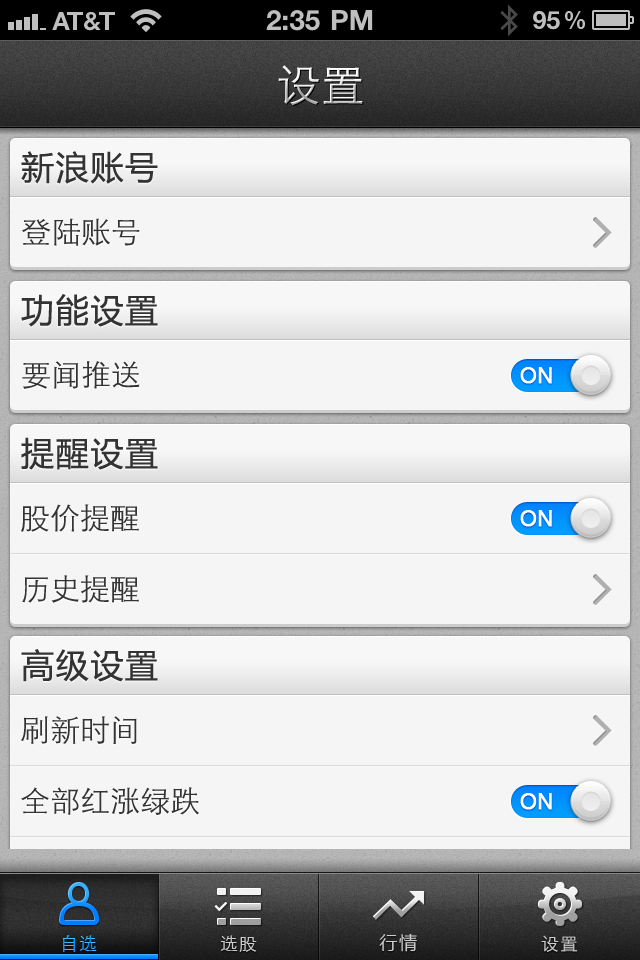
<style>
.page{position:relative;width:640px;height:960px;background:#f5f5f5}
.page>*{position:absolute;margin:0}
.t1{font:44px "STXihei";letter-spacing:0.005em;color:#ffffff}
.t2{font:33px "MicrosoftYaHei";letter-spacing:0.05em;color:#333333}
.t3{font:30px "STXihei";color:#333333}
.t4{font:22px "MicrosoftSansSerif";letter-spacing:-0.015em;color:#ffffff;font-weight:bold}
.t5{font:18px "STXihei";letter-spacing:0.05em}
.t6{font:18px "STXihei";letter-spacing:0.05em;color:#cccccc}
.t7{font:18px "MicrosoftYaHei";letter-spacing:0.1em;color:#cccccc}
</style>
<div class="page">
<p class="t1" style="left:278px;top:65px;width:85px;height:41px">设置</p>
<p class="t2" style="left:21px;top:151px;width:137px;height:33px">新浪账号</p>
<p class="t3" style="left:22px;top:218px;width:118px;height:28px">登陆账号</p>
<p class="t2" style="left:21px;top:294px;width:137px;height:33px">功能设置</p>
<p class="t3" style="left:22px;top:361px;width:118px;height:28px">要闻推送</p>
<p class="t4" style="left:520px;top:367px;width:32px;height:17px">ON</p>
<p class="t2" style="left:21px;top:437px;width:137px;height:33px">提醒设置</p>
<p class="t3" style="left:21px;top:504px;width:118px;height:28px">股价提醒</p>
<p class="t4" style="left:520px;top:510px;width:32px;height:17px">ON</p>
<p class="t3" style="left:22px;top:575px;width:117px;height:28px">历史提醒</p>
<p class="t5" style="left:62px;top:935px;width:35px;height:17px">自选</p>
<p class="t6" style="left:220px;top:935px;width:37px;height:17px">选股</p>
<p class="t7" style="left:379px;top:933px;width:38px;height:19px">行情</p>
<p class="t6" style="left:541px;top:935px;width:37px;height:17px">设置</p>
</div>
